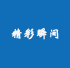
<style>
.page{position:relative;width:70px;height:68px;background:#106db7}
.page>*{position:absolute;margin:0}
.t1{font:12px "STXinwei";color:#f8f4f4;font-weight:bold}
</style>
<div class="page">
<p class="t1" style="left:11px;top:27px;width:48px;height:13px">精彩瞬间</p>
</div>
